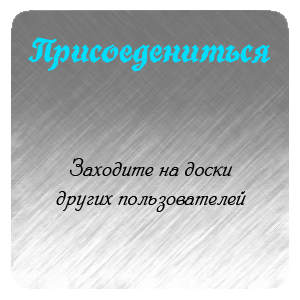
<style>
.page{position:relative;width:300px;height:300px}
.page>*{position:absolute;margin:0}
.t1{font:36px "TrueGritC";color:#00deff}
.t2{font:24px "PhillippScript";color:#000000}
</style>
<div class="page">
<p class="t1" style="left:28px;top:37px;width:243px;height:35px">Присоедениться</p>
<p class="t2" style="left:56px;top:158px;width:190px;height:54px;text-align:center">Заходите на доски других пользователей</p>
</div>
